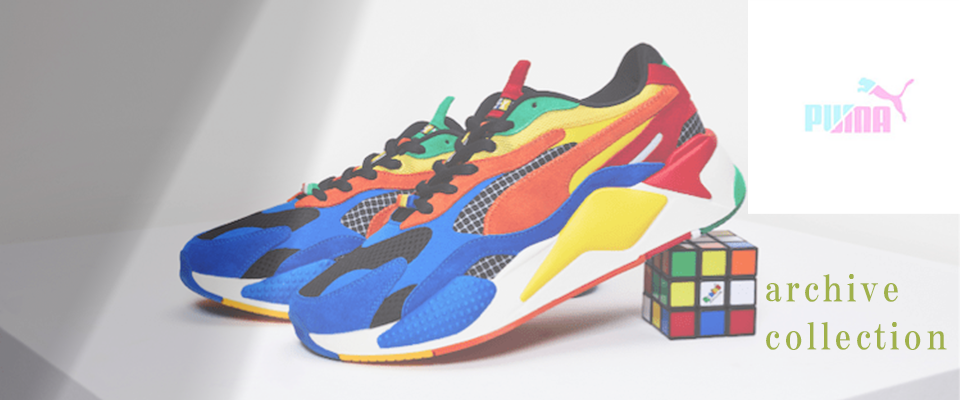
<style>
.page{position:relative;width:960px;height:400px}
.page>*{position:absolute;margin:0}
.t1{font:36px/48px "HGPMinchoE";letter-spacing:0.1em;color:#a0b14b}
</style>
<div class="page">
<p class="t1" style="left:766px;top:274px;width:181px;height:76px">archive collection</p>
</div>
